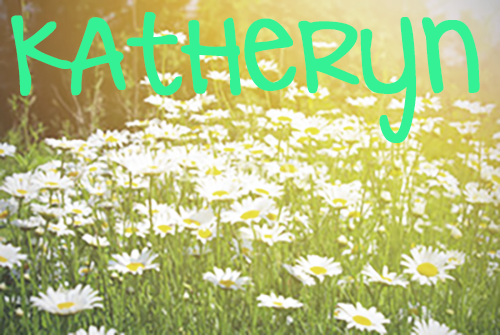
<style>
.page{position:relative;width:500px;height:335px}
.page>*{position:absolute;margin:0}
.t1{font:90px "DJBILoveMeSomeAly";color:#35f195;font-weight:bold}
</style>
<div class="page">
<p class="t1" style="left:11px;top:12px;width:469px;height:131px">katheryn</p>
</div>
